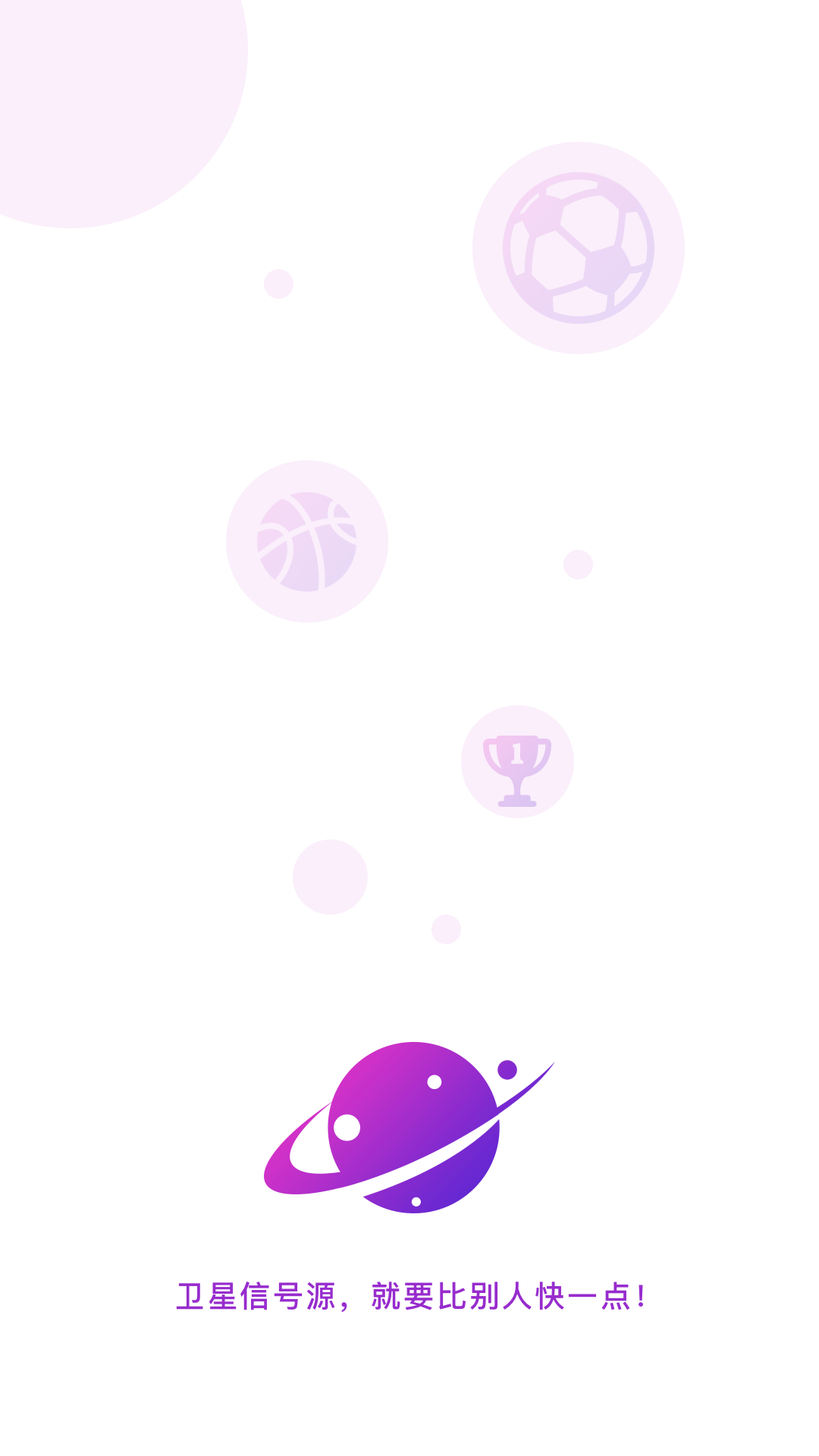
<style>
.page{position:relative;width:819px;height:1456px;background:#ffffff}
.page>*{position:absolute;margin:0}
.t1{font:30.3px "PingFangSC-Medium";letter-spacing:0.08em;color:#982ccd}
</style>
<div class="page">
<p class="t1" style="left:176px;top:1281px;width:467px;height:32px">卫星信号源，就要比别人快一点！</p>
</div>
